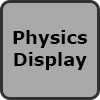
<style>
.page{position:relative;width:100px;height:100px;background:#aba8a8}
.page>*{position:absolute;margin:0}
.t1{font:18px "Verdana-Bold";color:#000000}
</style>
<div class="page">
<p class="t1" style="left:13px;top:30px;width:74px;height:40px;text-align:center">Physics Display</p>
</div>
